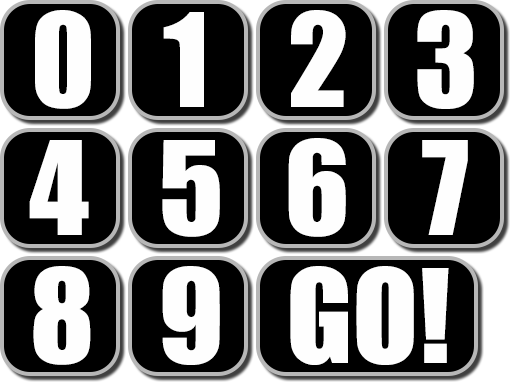
<style>
.page{position:relative;width:510px;height:382px;background:#000000}
.page>*{position:absolute;margin:0}
.t1{font:120px "Impact";color:#fefefe}
</style>
<div class="page">
<p class="t1" style="left:35px;top:10px;width:56px;height:99px">0</p>
<p class="t1" style="left:163px;top:12px;width:41px;height:95px">1</p>
<p class="t1" style="left:291px;top:10px;width:55px;height:97px">2</p>
<p class="t1" style="left:417px;top:10px;width:57px;height:99px">3</p>
<p class="t1" style="left:29px;top:140px;width:60px;height:95px">4</p>
<p class="t1" style="left:162px;top:140px;width:58px;height:97px">5</p>
<p class="t1" style="left:288px;top:138px;width:58px;height:99px">6</p>
<p class="t1" style="left:422px;top:140px;width:46px;height:95px">7</p>
<p class="t1" style="left:33px;top:266px;width:58px;height:99px">8</p>
<p class="t1" style="left:162px;top:266px;width:58px;height:99px">9</p>
<p class="t1" style="left:290px;top:266px;width:159px;height:99px">GO!</p>
</div>
